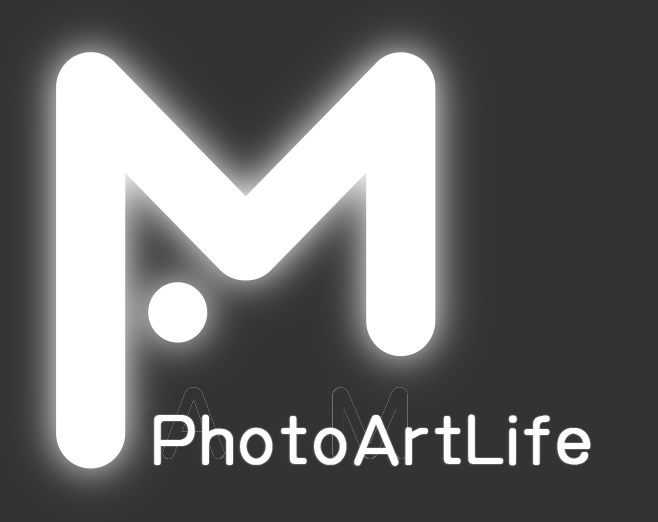
<style>
.page{position:relative;width:658px;height:522px;background:#333333}
.page>*{position:absolute;margin:0}
.t1{font:66.8px "ç»å¸ä¸­åç®-regular";letter-spacing:0.003em;color:#fefefe;font-weight:bold;scale:0.94 1}
</style>
<div class="page">
<p class="t1" style="left:154px;top:414px;width:437px;height:52px">PhotoArtLife</p>
</div>
